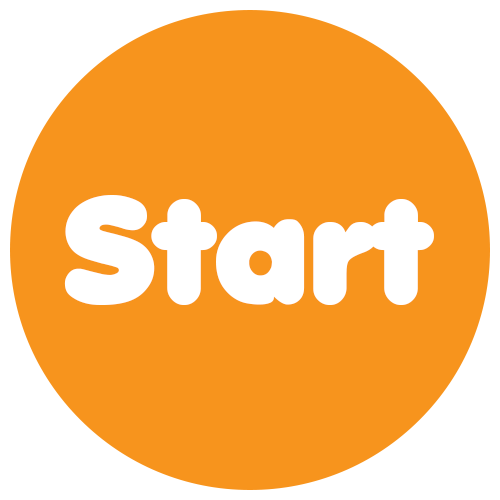
<style>
.page{position:relative;width:500px;height:500px;background:#f7941d}
.page>*{position:absolute;margin:0}
.t1{font:150px "Valken";color:#ffffff}
</style>
<div class="page">
<p class="t1" style="left:64px;top:195px;width:370px;height:110px">Start</p>
</div>
